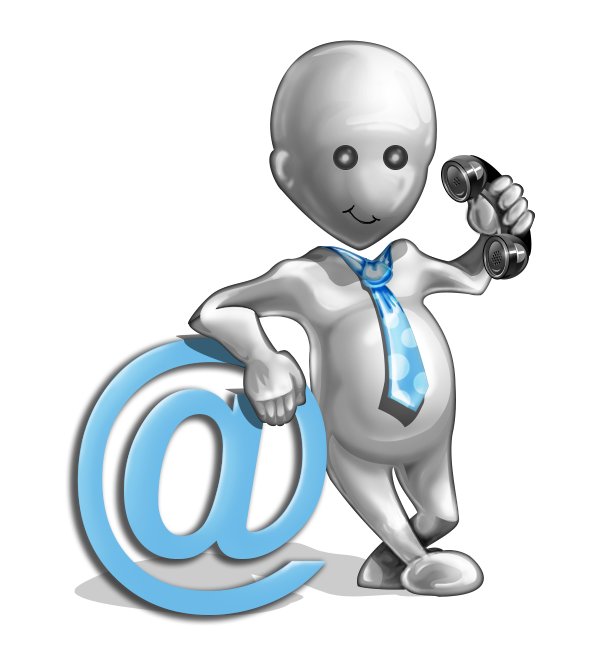
<style>
.page{position:relative;width:610px;height:657px;background:#ffffff}
.page>*{position:absolute;margin:0}
.t1{font:327.7px "Impact";color:#6bbae8}
</style>
<div class="page">
<p class="t1" style="left:77px;top:337px;width:250px;height:278px">@</p>
</div>
